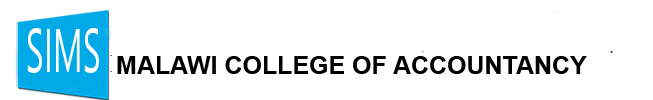
<style>
.page{position:relative;width:653px;height:100px;background:#ffffff}
.page>*{position:absolute;margin:0}
.t1{font:25px "Arial-BoldMT";color:#000000}
</style>
<div class="page">
<p class="t1" style="left:117px;top:56px;width:470px;height:18px">MALAWI COLLEGE OF ACCOUNTANCY</p>
</div>
